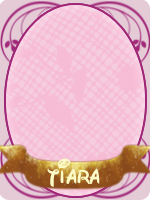
<style>
.page{position:relative;width:150px;height:200px}
.page>*{position:absolute;margin:0}
.t1{font:37.4px "Waltograph";color:#fcfac7}
</style>
<div class="page">
<p class="t1" style="left:47px;top:158px;width:53px;height:29px">tiara</p>
</div>
